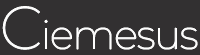
<style>
.page{position:relative;width:200px;height:55px;background:#323031}
.page>*{position:absolute;margin:0}
.t1{font:40px "Montserrat-Thin";letter-spacing:-0.025em;color:#ffffff}
.t2{font:60px "Montserrat-Thin";letter-spacing:-0.025em;color:#ffffff}
</style>
<div class="page">
<p class="t1" style="left:3px;top:6px;width:194px;height:44px"><span class="t2">C</span>iemesus</p>
</div>
